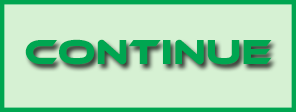
<style>
.page{position:relative;width:296px;height:112px;background:#d6f1d3}
.page>*{position:absolute;margin:0}
.t1{font:36px "EthnocentricRg-Regular";color:#00a651}
</style>
<div class="page">
<p class="t1" style="left:25px;top:39px;width:247px;height:26px">continue</p>
</div>
